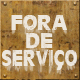
<style>
.page{position:relative;width:80px;height:80px}
.page>*{position:absolute;margin:0}
.t1{font:21.6px/18.2px "CartesDisplaySSK";color:#ede7dd;text-transform:uppercase;scale:1.04 1}
.t2{font:21.6px/18.2px "CartesDisplaySSK";color:#ede7dd;text-transform:uppercase;scale:0.89 1}
.t3{font:20.9px "CartesDisplaySSK";color:#ede7dd;text-transform:uppercase;font-style:italic;scale:1.23 1}
</style>
<div class="page">
<p class="t1" style="left:2px;top:15px;width:75px;height:51px;text-align:center">fora<br>de<br><span class="t2">seRvico</span></p>
<p class="t3" style="left:56px;top:65px;width:7px;height:5px">,</p>
</div>
